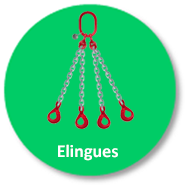
<style>
.page{position:relative;width:185px;height:185px;background:#00cc66}
.page>*{position:absolute;margin:0}
.t1{font:18px "Calibri-Bold";color:#ffffff}
</style>
<div class="page">
<p class="t1" style="left:58px;top:144px;width:60px;height:17px">Elingues</p>
</div>
